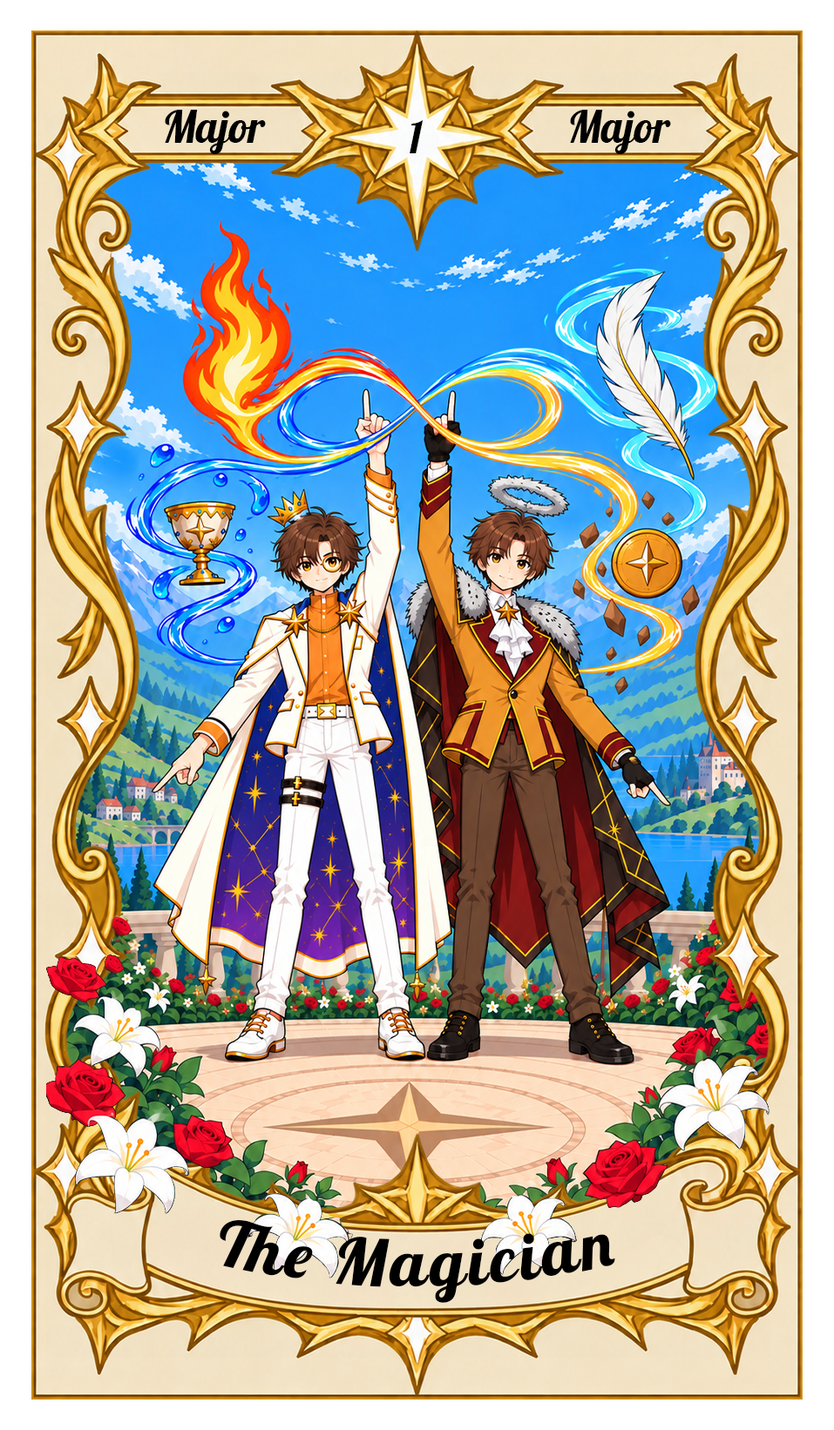
<style>
.page{position:relative;width:834px;height:1430px}
.page>*{position:absolute;margin:0}
.t1{font:43.6px "Lobster-Regular";color:#000000}
.t2{font:65.3px "Lobster-Regular";letter-spacing:0.05em;color:#000000}
</style>
<div class="page">
<p class="t1" style="left:165px;top:110px;width:101px;height:44px">Major</p>
<p class="t1" style="left:570px;top:110px;width:101px;height:44px">Major</p>
<p class="t1" style="left:409px;top:120px;width:14px;height:33px">1</p>
<p class="t2" style="left:220px;top:1220px;width:395px;height:83px">The Magician</p>
</div>
